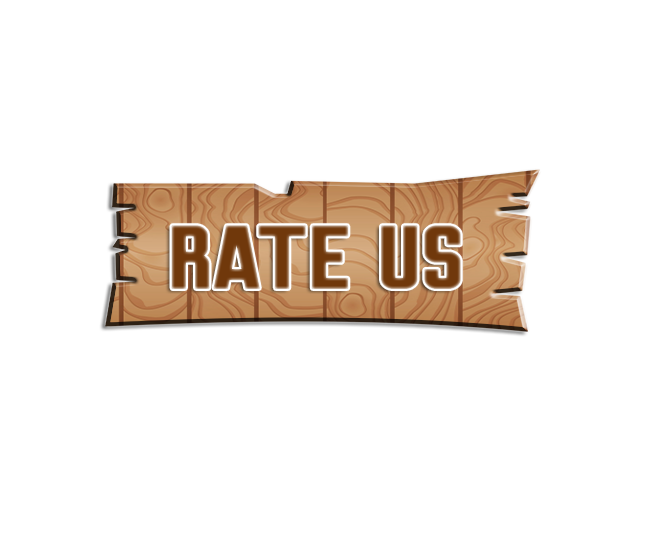
<style>
.page{position:relative;width:650px;height:536px;background:#ffffff}
.page>*{position:absolute;margin:0}
.t1{font:70px "BrewmasterGothicRound";color:#70380b;scale:1.26 1}
</style>
<div class="page">
<p class="t1" style="left:171px;top:225px;width:290px;height:64px">rate us</p>
</div>
